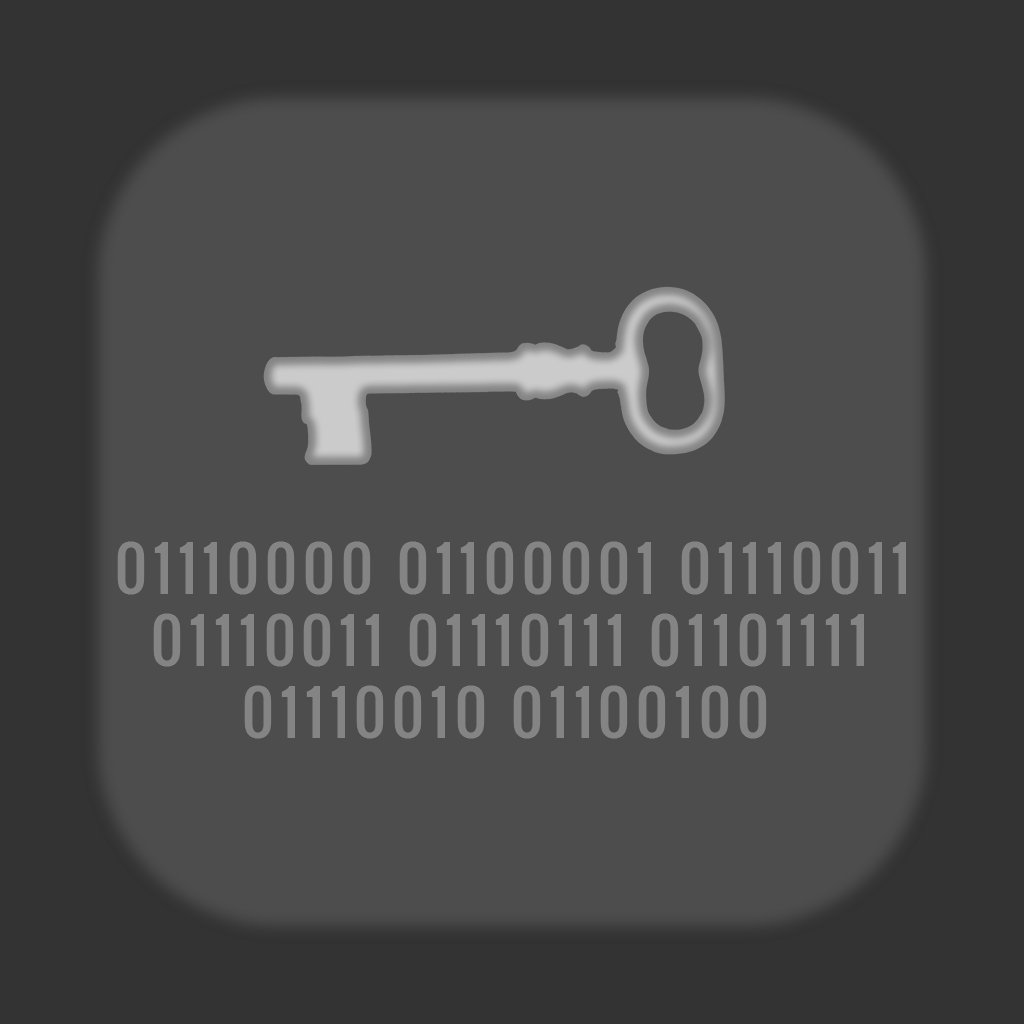
<style>
.page{position:relative;width:1024px;height:1024px;background:#4d4d4d}
.page>*{position:absolute;margin:0}
.t1{font:60px "Oswald-Regular";letter-spacing:0.1em;color:#848484}
</style>
<div class="page">
<p class="t1" style="left:117px;top:541px;width:789px;height:198px">01110000 01100001 01110011<br>  01110011 01110111 01101111<br>       01110010 01100100</p>
</div>
